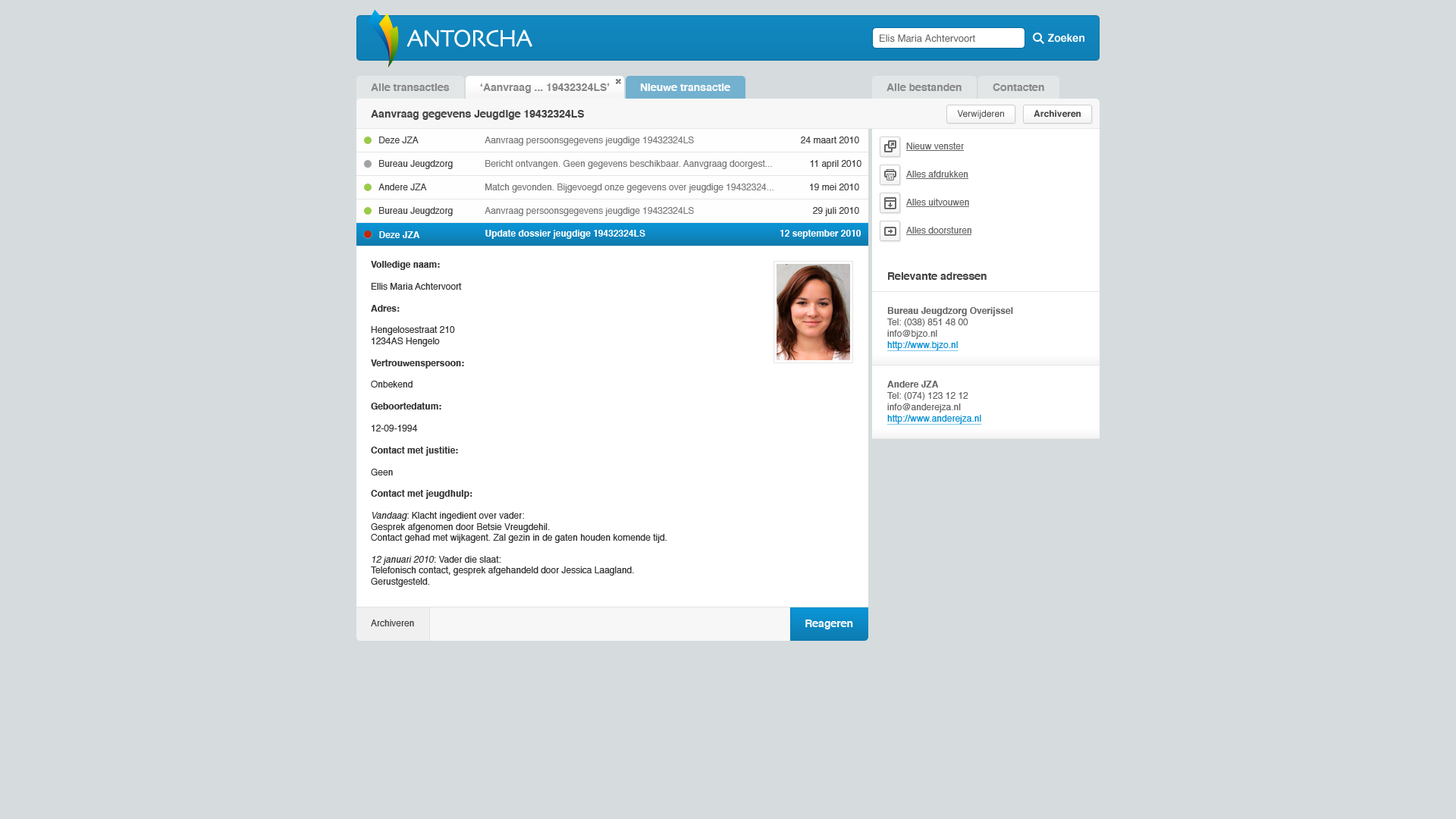
<style>
.page{position:relative;width:1456px;height:819px;background:#d6dbdd}
.page>*{position:absolute;margin:0}
.t1{font:24.7px "Skia-Regular";letter-spacing:-0.05em;color:#ffffff}
.t2{font:9.9px "Helvetica";color:#666666}
.t3{font:10.6px "Helvetica-Bold";color:#ffffff}
.t4{font:10.6px "Helvetica-Bold";color:#888888}
.t5{font:10.6px "Helvetica-Bold";color:#444444}
.t6{font:9.1px "Helvetica";color:#444444}
.t7{font:9.1px "Helvetica-Bold";color:#444444}
.t8{font:9.1px "Helvetica";color:#7b7b7b}
.t9{font:9.1px "Helvetica";color:#666666}
.t10{font:9.1px "Helvetica-Bold";color:#fefefe}
.t11{font:9.1px "Helvetica-Bold";color:#ffffff}
.t12{font:9.1px "Helvetica";color:#333333}
.t13{font:9.1px "Helvetica-Bold";color:#333333}
.t14{font:9.1px "Helvetica";color:#333333;font-style:italic}
.t15{font:9.1px/11.4px "Helvetica";color:#666666}
.t16{font:9.1px/11.4px "Helvetica-Bold";color:#666666}
.t17{font:9.1px/11.4px "Helvetica";color:#008bd2;text-decoration:underline}
</style>
<div class="page">
<p class="t1" style="left:406px;top:30px;width:126px;height:17px">ANTORCHA</p>
<p class="t2" style="left:880px;top:34px;width:95px;height:8px">Elis Maria Achtervoort</p>
<p class="t3" style="left:1048px;top:33px;width:36px;height:9px">Zoeken</p>
<p class="t4" style="left:371px;top:83px;width:79px;height:8px">Alle transacties</p>
<p class="t4" style="left:480px;top:83px;width:130px;height:10px">‘Aanvraag ... 19432324LS’</p>
<p class="t3" style="left:640px;top:83px;width:90px;height:8px">Nieuwe transactie</p>
<p class="t4" style="left:886px;top:83px;width:76px;height:8px">Alle bestanden</p>
<p class="t4" style="left:993px;top:83px;width:51px;height:8px">Contacten</p>
<p class="t5" style="left:371px;top:110px;width:213px;height:10px">Aanvraag gegevens Jeugdige 19432324LS</p>
<p class="t6" style="left:957px;top:110px;width:47px;height:9px">Verwijderen</p>
<p class="t7" style="left:1034px;top:110px;width:47px;height:8px">Archiveren</p>
<p class="t6" style="left:379px;top:136px;width:40px;height:7px">Deze JZA</p>
<p class="t8" style="left:485px;top:136px;width:209px;height:10px">Aanvraag persoonsgegevens jeugdige 19432324LS</p>
<p class="t6" style="left:801px;top:136px;width:58px;height:7px">24 maart 2010</p>
<p class="t9" style="left:906px;top:143px;width:58px;height:6px">Nieuw venster</p>
<p class="t6" style="left:379px;top:160px;width:74px;height:9px">Bureau Jeugdzorg</p>
<p class="t8" style="left:485px;top:160px;width:287px;height:9px">Bericht ontvangen. Geen gegevens beschikbaar. Aanvgraag doorgest...</p>
<p class="t6" style="left:810px;top:160px;width:51px;height:9px">11 april 2010</p>
<p class="t9" style="left:906px;top:171px;width:62px;height:6px">Alles afdrukken</p>
<p class="t6" style="left:378px;top:184px;width:49px;height:6px">Andere JZA</p>
<p class="t8" style="left:485px;top:184px;width:288px;height:9px">Match gevonden. Bijgevoegd onze gegevens over jeugdige 19432324...</p>
<p class="t6" style="left:810px;top:184px;width:49px;height:6px">19 mei 2010</p>
<p class="t6" style="left:379px;top:207px;width:74px;height:9px">Bureau Jeugdzorg</p>
<p class="t8" style="left:485px;top:207px;width:209px;height:9px">Aanvraag persoonsgegevens jeugdige 19432324LS</p>
<p class="t6" style="left:813px;top:207px;width:46px;height:9px">29 juli 2010</p>
<p class="t9" style="left:906px;top:199px;width:63px;height:7px">Alles uitvouwen</p>
<p class="t10" style="left:379px;top:231px;width:41px;height:7px">Deze JZA</p>
<p class="t11" style="left:485px;top:230px;width:160px;height:9px">Update dossier jeugdige 19432324LS</p>
<p class="t11" style="left:780px;top:230px;width:81px;height:9px">12 september 2010</p>
<p class="t9" style="left:906px;top:227px;width:65px;height:7px">Alles doorsturen</p>
<p class="t12" style="left:371px;top:261px;width:296px;height:326px"><span class="t13">Volledige naam:<br><br></span>Ellis Maria Achtervoort<br><span class="t13"><br>Adres:<br><br></span>Hengelosestraat 210<br>1234AS Hengelo<br><br><span class="t13">Vertrouwenspersoon:<br></span><br>Onbekend<br><br><span class="t13">Geboortedatum:<br><br></span>12-09-1994<br><br><span class="t13">Contact met justitie:<br><br></span>Geen<br><br><span class="t13">Contact met jeugdhulp:<br><br></span><span class="t14">Vandaag</span>: Klacht ingedient over vader:<br>Gesprek afgenomen door Betsie Vreugdehil.<br>Contact gehad met wijkagent. Zal gezin in de gaten houden komende tijd.<br><br><span class="t14">12 januari 2010</span>: Vader die slaat:<br>Telefonisch contact, gesprek afgehandeld door Jessica Laagland.<br>Gerustgesteld.</p>
<p class="t5" style="left:888px;top:272px;width:99px;height:8px">Relevante adressen</p>
<p class="t15" style="left:887px;top:307px;width:126px;height:44px"><span class="t16">Bureau Jeugdzorg Overijssel<br></span>Tel: (038) 851 48 00<br>info@bjzo.nl<br><span class="t17">http://www.bjzo.nl</span></p>
<p class="t15" style="left:887px;top:381px;width:95px;height:44px"><span class="t16">Andere JZA<br></span>Tel: (074) 123 12 12<br>info@anderejza.nl<br><span class="t17">http://www.anderejza.nl</span></p>
<p class="t6" style="left:371px;top:620px;width:43px;height:6px">Archiveren</p>
<p class="t3" style="left:805px;top:620px;width:48px;height:9px">Reageren</p>
</div>
